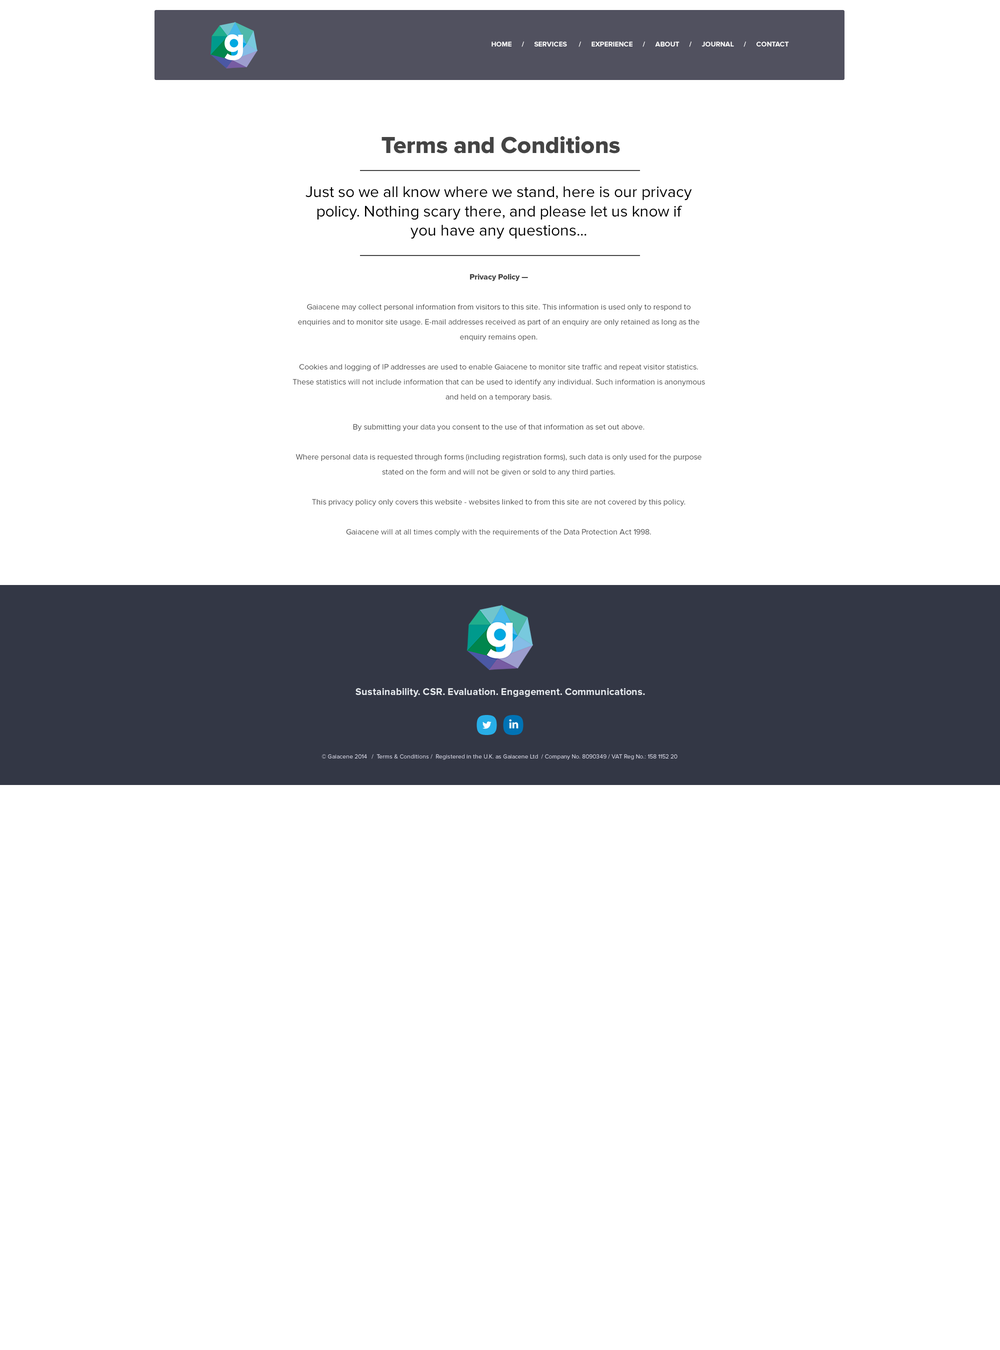
<style>
.page{position:relative;width:1000px;height:1350px;background:#ffffff}
.page>*{position:absolute;margin:0}
.t1{font:7px "ProximaNova-Bold";color:#ffffff}
.t2{font:24px "ProximaNova-Extrabld";color:#444444}
.t3{font:16px/19.2px "ProximaNova-Regular";color:#000000}
.t4{font:8px/15px "ProximaNova-Regular";color:#444444}
.t5{font:8px/15px "ProximaNova-Extrabld";color:#444444}
.t6{font:10px "ProximaNova-Bold";color:#e5e9ed}
.t7{font:10px "ProximaNova-Bold";letter-spacing:0.003em;color:#e5e9ed}
.t8{font:10px "ProximaNova-Bold";letter-spacing:0.008em;color:#e5e9ed}
.t9{font:10px "ProximaNova-Bold";letter-spacing:0.022em;color:#e5e9ed}
.t10{font:10px "ProximaNova-Bold";letter-spacing:0.004em;color:#e5e9ed}
.t11{font:10px "ProximaNova-Bold";letter-spacing:0.001em;color:#e5e9ed}
.t12{font:10px "ProximaNova-Bold";letter-spacing:0.009em;color:#e5e9ed}
.t13{font:10px "ProximaNova-Bold";letter-spacing:0.012em;color:#e5e9ed}
.t14{font:10px "ProximaNova-Bold";letter-spacing:0.019em;color:#e5e9ed}
.t15{font:10px "ProximaNova-Bold";letter-spacing:-0.047em;color:#e5e9ed}
.t16{font:10px "ProximaNova-Bold";letter-spacing:0.016em;color:#e5e9ed}
.t17{font:10px "ProximaNova-Bold";letter-spacing:-0.009em;color:#e5e9ed}
.t18{font:10px "ProximaNova-Bold";letter-spacing:0.006em;color:#e5e9ed}
.t19{font:10px "ProximaNova-Bold";letter-spacing:0.005em;color:#e5e9ed}
.t20{font:10px "ProximaNova-Bold";letter-spacing:0.014em;color:#e5e9ed}
.t21{font:10px "ProximaNova-Bold";letter-spacing:0.007em;color:#e5e9ed}
.t22{font:10px "ProximaNova-Bold";letter-spacing:0.01em;color:#e5e9ed}
.t23{font:10px "ProximaNova-Bold";letter-spacing:-0.001em;color:#e5e9ed}
.t24{font:10px "ProximaNova-Bold";letter-spacing:0.002em;color:#e5e9ed}
.t25{font:10px "ProximaNova-Bold";letter-spacing:0.018em;color:#e5e9ed}
.t26{font:6px "ProximaNova-Regular";color:#dbdbea}
</style>
<div class="page">
<p class="t1" style="left:492px;top:42px;width:297px;height:5px">HOME     /     SERVICES      /     EXPERIENCE     /     ABOUT     /     JOURNAL     /     CONTACT</p>
<p class="t2" style="left:382px;top:136px;width:238px;height:18px">Terms and Conditions</p>
<p class="t3" style="left:306px;top:186px;width:386px;height:53px;text-align:center">Just so we all know where we stand, here is our privacy policy. Nothing scary there, and please let us know if you have any questions...</p>
<p class="t4" style="left:292px;top:274px;width:413px;height:262px;text-align:center"><span class="t5">Privacy Policy —<br><br></span>Gaiacene may collect personal information from visitors to this site. This information is used only to respond to enquiries and to monitor site usage. E-mail addresses received as part of an enquiry are only retained as long as the enquiry remains open.<br><br>Cookies and logging of IP addresses are used to enable Gaiacene to monitor site traffic and repeat visitor statistics. These statistics will not include information that can be used to identify any individual. Such information is anonymous and held on a temporary basis.<br><br>By submitting your data you consent to the use of that information as set out above.<br><br>Where personal data is requested through forms (including registration forms), such data is only used for the purpose stated on the form and will not be given or sold to any third parties.<br><br>This privacy policy only covers this website - websites linked to from this site are not covered by this policy.<br><br>Gaiacene will at all times comply with the requirements of the Data Protection Act 1998.</p>
<p class="t6" style="left:356px;top:688px;width:289px;height:9px"><span class="t7">S</span><span class="t8">u</span><span class="t9">s</span><span class="t7">t</span><span class="t10">ai</span><span class="t11">n</span><span class="t12">a</span>bi<span class="t11">l</span><span class="t13">i</span><span class="t14">t</span><span class="t15">y</span>. <span class="t14">C</span>S<span class="t16">R</span>. <span class="t17">E</span>v<span class="t18">a</span><span class="t7">l</span><span class="t19">u</span><span class="t20">a</span><span class="t17">t</span>i<span class="t18">o</span>n. E<span class="t19">ng</span><span class="t21">a</span><span class="t12">ge</span><span class="t21">m</span><span class="t12">e</span><span class="t22">n</span><span class="t23">t</span>. <span class="t11">C</span><span class="t18">o</span><span class="t21">m</span><span class="t10">m</span><span class="t8">u</span><span class="t24">ni</span><span class="t25">c</span><span class="t20">a</span><span class="t17">t</span>i<span class="t18">on</span><span class="t24">s</span>.</p>
<p class="t26" style="left:322px;top:754px;width:356px;height:6px">© Gaiacene 2014   /  Terms &amp; Conditions /  Registered in the U.K. as Gaiacene Ltd  / Company No. 8090349 / VAT Reg No.: 158 1152 20</p>
</div>
